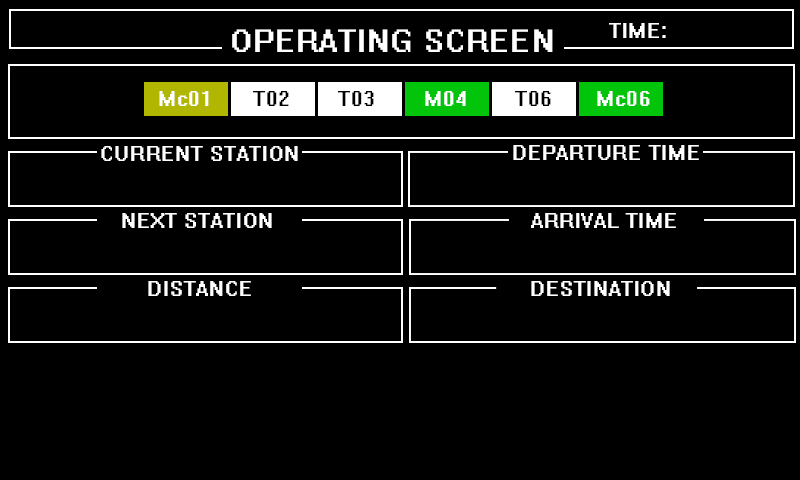
<style>
.page{position:relative;width:800px;height:480px;background:#000000}
.page>*{position:absolute;margin:0}
.t1{font:36px "System";letter-spacing:0.025em;color:#ffffff}
.t2{font:24px "System";letter-spacing:0.025em;color:#ffffff}
.t3{font:24px "System";letter-spacing:0.025em;color:#000000}
</style>
<div class="page">
<p class="t1" style="left:232px;top:29px;width:321px;height:23px">OPERATING SCREEN</p>
<p class="t2" style="left:609px;top:23px;width:57px;height:15px">TIME:</p>
<p class="t2" style="left:159px;top:91px;width:50px;height:15px">Mc01</p>
<p class="t3" style="left:253px;top:91px;width:36px;height:15px">T02</p>
<p class="t3" style="left:338px;top:91px;width:36px;height:15px">T03</p>
<p class="t2" style="left:425px;top:91px;width:41px;height:15px">M04</p>
<p class="t3" style="left:515px;top:91px;width:36px;height:15px">T06</p>
<p class="t2" style="left:597px;top:91px;width:53px;height:15px">Mc06</p>
<p class="t2" style="left:101px;top:146px;width:197px;height:15px">CURRENT STATION</p>
<p class="t2" style="left:513px;top:145px;width:186px;height:15px">DEPARTURE TIME</p>
<p class="t2" style="left:122px;top:213px;width:150px;height:15px">NEXT STATION</p>
<p class="t2" style="left:531px;top:213px;width:145px;height:15px">ARRIVAL TIME</p>
<p class="t2" style="left:148px;top:281px;width:103px;height:15px">DISTANCE</p>
<p class="t2" style="left:531px;top:281px;width:139px;height:15px">DESTINATION</p>
</div>
